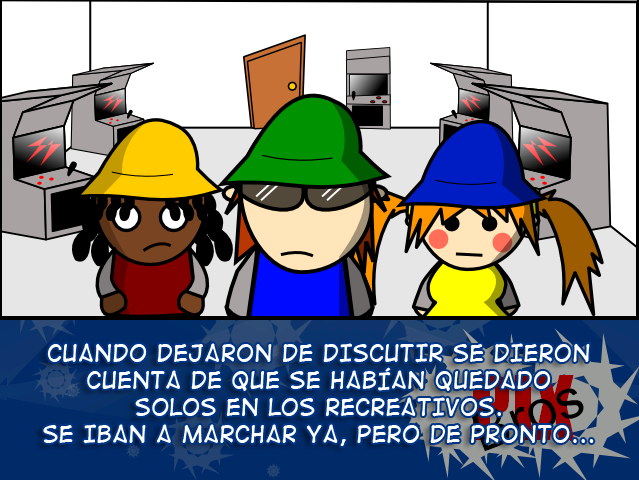
<style>
.page{position:relative;width:639px;height:480px;background:#ffffff}
.page>*{position:absolute;margin:0}
.t1{font:22.4px "DigitalStrip2";color:#ffffff}
</style>
<div class="page">
<p class="t1" style="left:43px;top:343px;width:551px;height:103px;text-align:center">cuando dejaron de discutir se dieron cuenta de que se habían quedado <br>solos en los recreativos. <br>Se iban a marchar ya, pero de pronto...</p>
</div>
